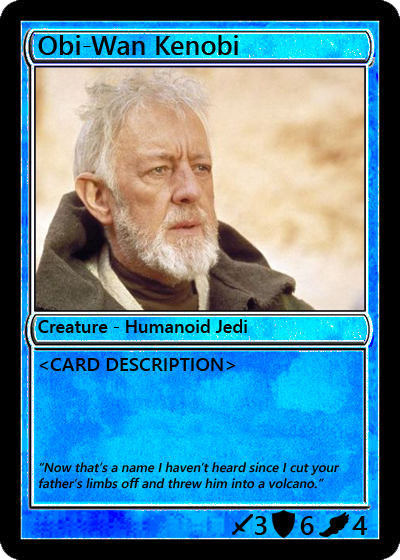
<style>
.page{position:relative;width:400px;height:560px}
.page>*{position:absolute;margin:0}
.t1{font:27px "YuGothicUI-Semibold";color:#000000}
.t2{font:18px "YuGothicUI-Semibold";color:#000000}
.t3{font:19px "YuGothicUI-Semibold";color:#000000}
.t4{font:13px "YuGothicUI-Semibold";color:#000000;font-style:italic}
</style>
<div class="page">
<p class="t1" style="left:38px;top:35px;width:200px;height:20px">Obi-Wan Kenobi</p>
<p class="t2" style="left:38px;top:319px;width:209px;height:14px">Creature - Humanoid Jedi</p>
<p class="t3" style="left:39px;top:358px;width:196px;height:13px">&lt;CARD DESCRIPTION&gt;</p>
<p class="t4" style="left:39px;top:462px;width:301px;height:27px">“Now that’s a name I haven’t heard since I cut your father’s limbs off and threw him into a volcano.”</p>
<p class="t1" style="left:255px;top:516px;width:12px;height:19px">3</p>
<p class="t1" style="left:300px;top:516px;width:14px;height:19px">6</p>
<p class="t1" style="left:352px;top:516px;width:15px;height:19px">4</p>
</div>
